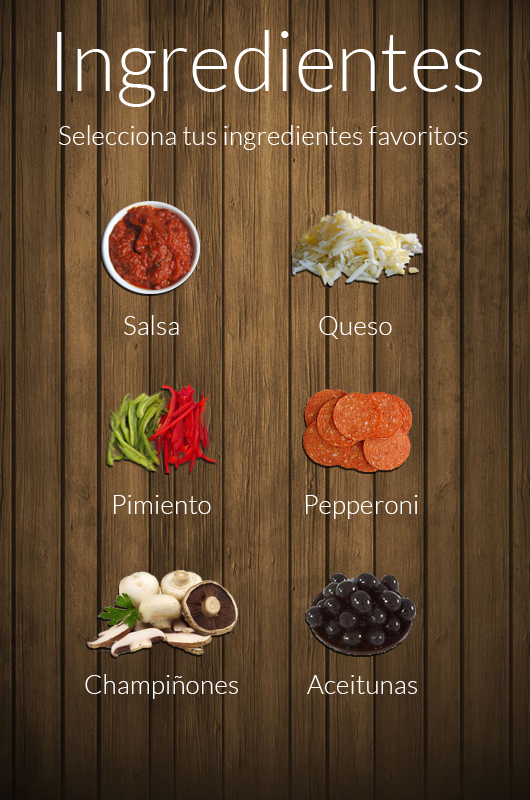
<style>
.page{position:relative;width:530px;height:800px}
.page>*{position:absolute;margin:0}
.t1{font:83.7px "Lato-Light";color:#ffffff}
.t2{font:26.9px "Lato-Light";color:#ffffff}
</style>
<div class="page">
<p class="t1" style="left:57px;top:30px;width:425px;height:77px">Ingredientes</p>
<p class="t2" style="left:59px;top:125px;width:409px;height:25px">Selecciona tus ingredientes favoritos</p>
<p class="t2" style="left:124px;top:315px;width:55px;height:20px">Salsa</p>
<p class="t2" style="left:319px;top:316px;width:73px;height:23px">Queso</p>
<p class="t2" style="left:114px;top:495px;width:97px;height:19px">Pimiento</p>
<p class="t2" style="left:306px;top:495px;width:112px;height:24px">Pepperoni</p>
<p class="t2" style="left:85px;top:674px;width:153px;height:25px">Champiñones</p>
<p class="t2" style="left:307px;top:675px;width:110px;height:19px">Aceitunas</p>
</div>
